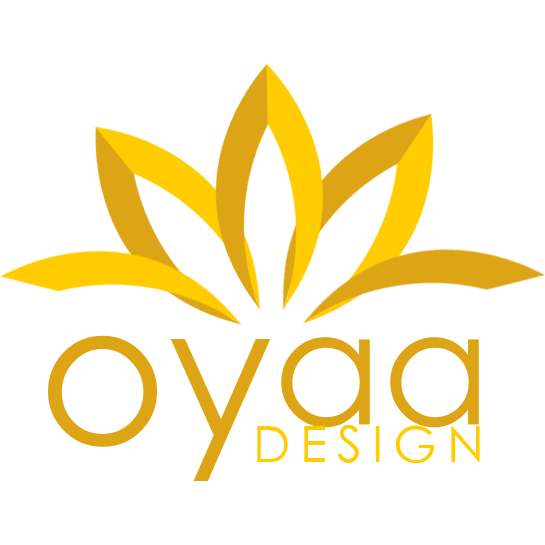
<style>
.page{position:relative;width:545px;height:545px;background:#ffffff}
.page>*{position:absolute;margin:0}
.t1{font:197.2px "STHeitiSC-Light";color:#dda416}
.t2{font:160px "STHeitiSC-Light";color:#dda416}
.t3{font:50px "STHeitiSC-Light";letter-spacing:0.2em;color:#ffcc00}
</style>
<div class="page">
<p class="t1" style="left:48px;top:335px;width:223px;height:146px">oy</p>
<p class="t2" style="left:281px;top:337px;width:198px;height:91px">aa</p>
<p class="t3" style="left:257px;top:425px;width:223px;height:38px">DESIGN</p>
</div>
